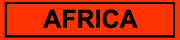
<style>
.page{position:relative;width:180px;height:40px;background:#ff3300}
.page>*{position:absolute;margin:0}
.t1{font:25px "Arial-BoldMT";color:#000000}
</style>
<div class="page">
<p class="t1" style="left:43px;top:9px;width:95px;height:20px">AFRICA</p>
</div>
